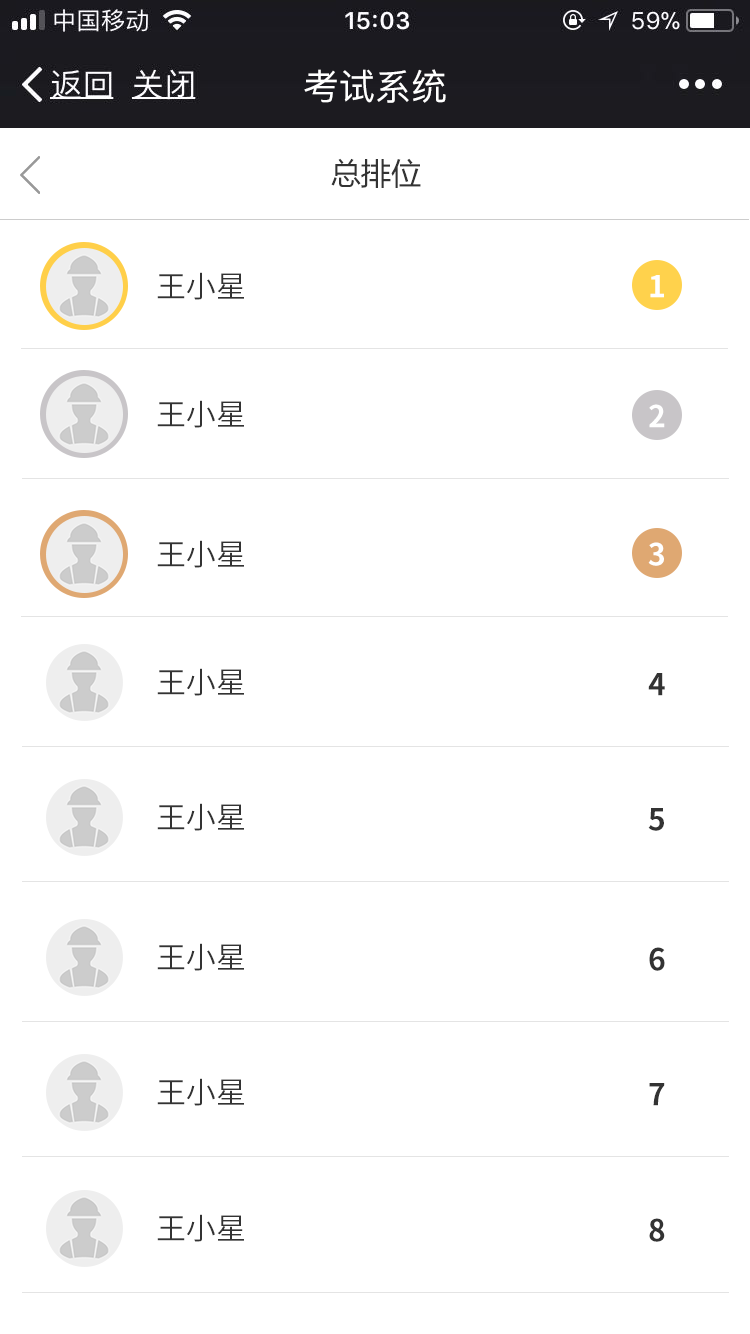
<style>
.page{position:relative;width:750px;height:1334px;background:#ffffff}
.page>*{position:absolute;margin:0}
.t1{font:36px "PingFang-SC-Medium";color:#ffffff}
.t2{font:30px "MicrosoftYaHei";color:#333333}
.t3{font:30px "SourceHanSansCN-Normal";color:#333333}
.t4{font:30px "SourceHanSansCN-Bold";color:#ffffff}
.t5{font:30px "SourceHanSansCN-Bold";color:#333333}
</style>
<div class="page">
<p class="t1" style="left:304px;top:69px;width:142px;height:34px">考试系统</p>
<p class="t2" style="left:331px;top:158px;width:90px;height:30px">总排位</p>
<p class="t3" style="left:157px;top:272px;width:87px;height:28px">王小星</p>
<p class="t4" style="left:650px;top:275px;width:14px;height:23px">1</p>
<p class="t3" style="left:157px;top:400px;width:87px;height:28px">王小星</p>
<p class="t4" style="left:649px;top:404px;width:16px;height:24px">2</p>
<p class="t3" style="left:157px;top:540px;width:87px;height:28px">王小星</p>
<p class="t4" style="left:648px;top:542px;width:16px;height:24px">3</p>
<p class="t3" style="left:157px;top:668px;width:87px;height:28px">王小星</p>
<p class="t5" style="left:648px;top:673px;width:17px;height:23px">4</p>
<p class="t3" style="left:157px;top:803px;width:87px;height:28px">王小星</p>
<p class="t5" style="left:648px;top:808px;width:16px;height:23px">5</p>
<p class="t3" style="left:157px;top:943px;width:87px;height:28px">王小星</p>
<p class="t5" style="left:649px;top:947px;width:16px;height:24px">6</p>
<p class="t3" style="left:157px;top:1078px;width:87px;height:28px">王小星</p>
<p class="t5" style="left:649px;top:1083px;width:16px;height:23px">7</p>
<p class="t3" style="left:157px;top:1214px;width:87px;height:28px">王小星</p>
<p class="t5" style="left:649px;top:1218px;width:16px;height:24px">8</p>
</div>
